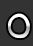
<style>
.page{position:relative;width:33px;height:46px;background:#333333}
.page>*{position:absolute;margin:0}
.t1{font:56px "IndieFlower-Regular";color:#ffffff}
</style>
<div class="page">
<p class="t1" style="left:8px;top:13px;width:22px;height:26px">0</p>
</div>
